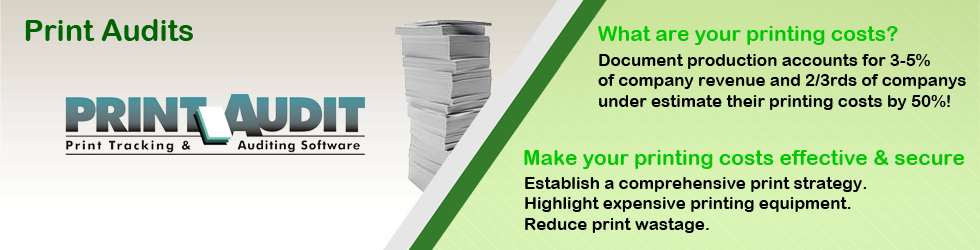
<style>
.page{position:relative;width:980px;height:250px}
.page>*{position:absolute;margin:0}
.t1{font:30px "ArialRoundedMTBold";color:#006400}
.t2{font:21px "ArialRoundedMTBold";color:#00c800}
.t3{font:17px "ArialRoundedMTBold";color:#000000}
</style>
<div class="page">
<p class="t1" style="left:25px;top:19px;width:168px;height:22px">Print Audits</p>
<p class="t2" style="left:598px;top:26px;width:300px;height:19px">What are your printing costs?</p>
<p class="t3" style="left:598px;top:54px;width:368px;height:56px">Document production accounts for 3-5%<br>of company revenue and 2/3rds of companys<br>under estimate their printing costs by 50%!</p>
<p class="t2" style="left:524px;top:150px;width:440px;height:19px">Make your printing costs effective &amp; secure</p>
<p class="t3" style="left:525px;top:177px;width:342px;height:56px">Establish a comprehensive print strategy.<br>Highlight expensive printing equipment. <br>Reduce print wastage.</p>
</div>
